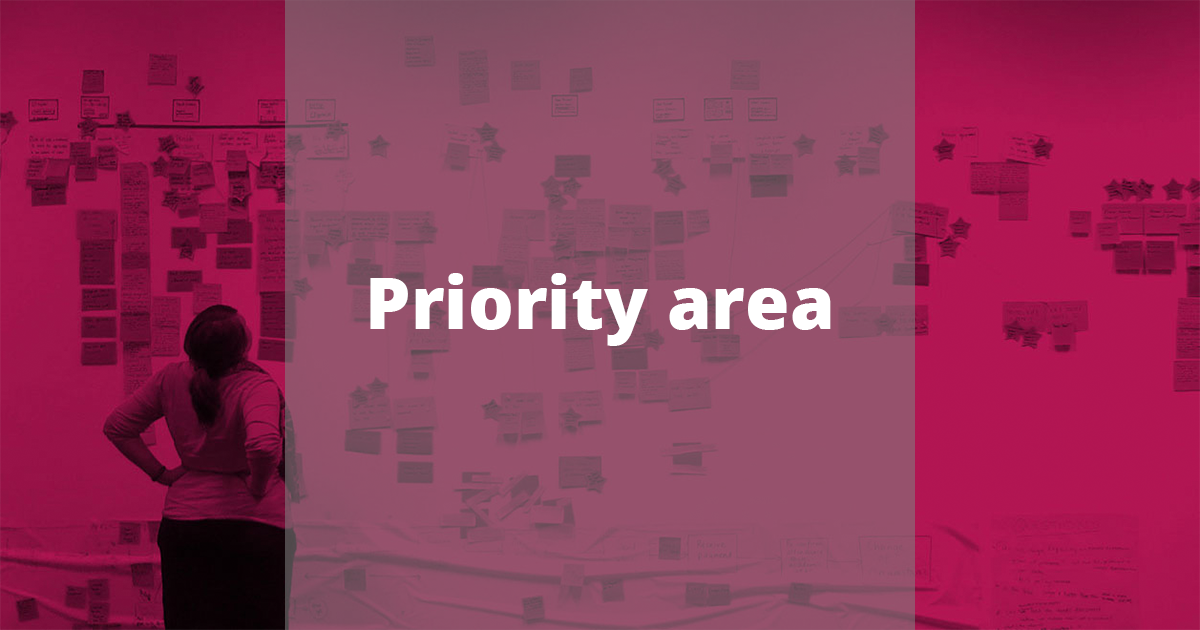
<style>
.page{position:relative;width:1200px;height:630px}
.page>*{position:absolute;margin:0}
.t1{font:72px "OpenSans-Extrabold";color:#ffffff}
</style>
<div class="page">
<p class="t1" style="left:370px;top:273px;width:461px;height:73px">Priority area</p>
</div>
